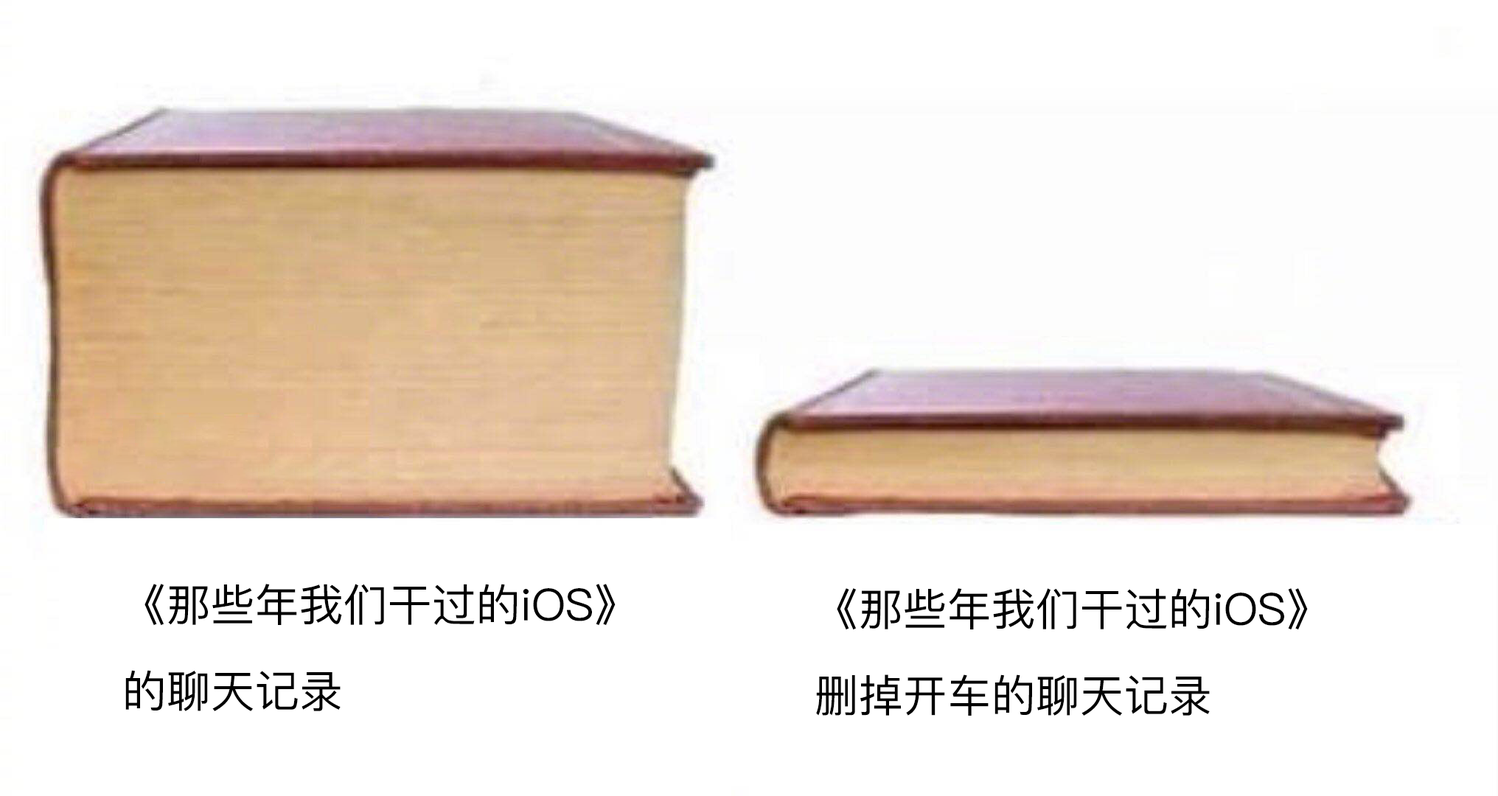
<style>
.page{position:relative;width:1498px;height:796px;background:#ffffff}
.page>*{position:absolute;margin:0}
.t1{font:44.2px/86.2px "PingFangSC-Regular";color:#000000}
</style>
<div class="page">
<p class="t1" style="left:125px;top:584px;width:491px;height:127px">《那些年我们干过的iOS》<br>的聊天记录</p>
<p class="t1" style="left:816px;top:588px;width:492px;height:128px">《那些年我们干过的iOS》<br>删掉开车的聊天记录</p>
</div>
